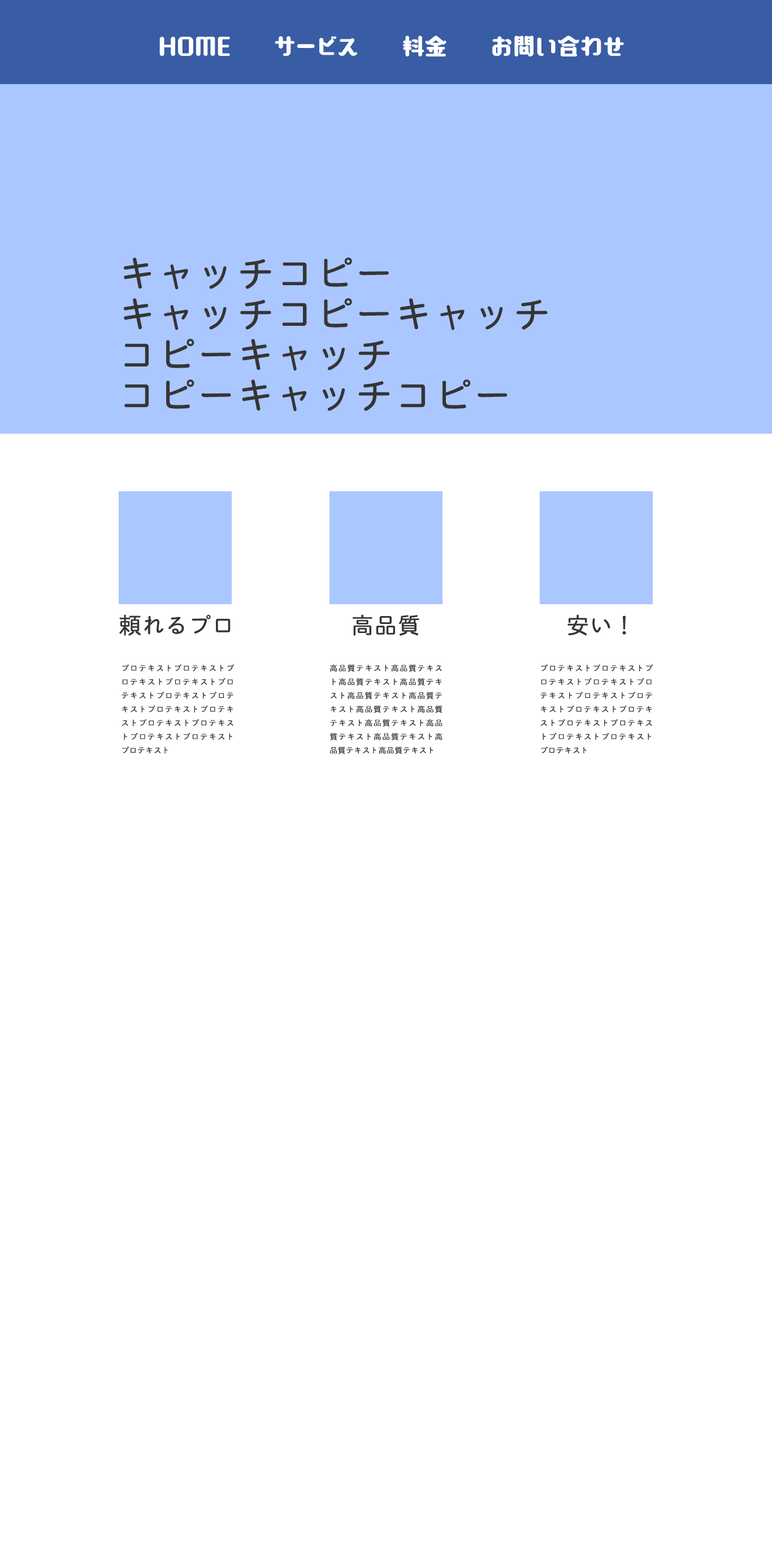
<style>
.page{position:relative;width:772px;height:1545px;background:#ffffff}
.page>*{position:absolute;margin:0}
.t1{font:22.6px "AokaneStd-EB";color:#ffffff;font-weight:bold}
.t2{font:38.4px/40.7px "TBChibiRGoPlusKPro-Regular";color:#353535;font-weight:bold}
.t3{font:22.6px "TBChibiRGoPlusKPro-Regular";color:#353535;font-weight:bold}
.t4{font:7.9px/13.7px "TBChibiRGoPlusKPro-Regular";color:#353535;font-weight:bold}
</style>
<div class="page">
<p class="t1" style="left:159px;top:36px;width:465px;height:20px">HOME     サービス     料金     お問い合わせ</p>
<p class="t2" style="left:124px;top:258px;width:423px;height:154px;text-align:justify">キャッチコピー<br>キャッチコピーキャッチ<br>コピーキャッチ<br>コピーキャッチコピー<br>キャッチコピーキャッチコピー</p>
<p class="t3" style="left:119px;top:615px;width:111px;height:21px">頼れるプロ</p>
<p class="t3" style="left:352px;top:615px;width:67px;height:21px">高品質</p>
<p class="t3" style="left:567px;top:615px;width:59px;height:21px">安い！</p>
<p class="t4" style="left:121px;top:664px;width:113px;height:90px;text-align:justify">プロテキストプロテキストプロテキストプロテキストプロテキストプロテキストプロテキストプロテキストプロテキストプロテキストプロテキストプロテキストプロテキストプロテキスト</p>
<p class="t4" style="left:330px;top:664px;width:112px;height:91px;text-align:justify">高品質テキスト高品質テキスト高品質テキスト高品質テキスト高品質テキスト高品質テキスト高品質テキスト高品質テキスト高品質テキスト高品質テキスト高品質テキスト高品質テキスト高品質テキスト</p>
<p class="t4" style="left:540px;top:664px;width:112px;height:90px;text-align:justify">プロテキストプロテキストプロテキストプロテキストプロテキストプロテキストプロテキストプロテキストプロテキストプロテキストプロテキストプロテキストプロテキストプロテキスト</p>
</div>
